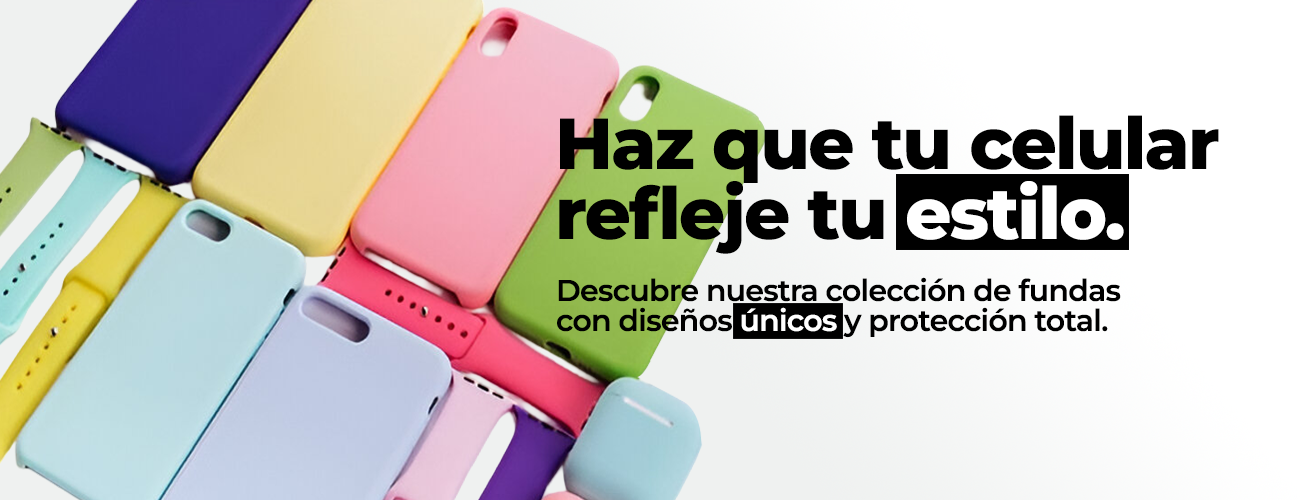
<style>
.page{position:relative;width:1300px;height:500px}
.page>*{position:absolute;margin:0}
.t1{font:72px/70px "Montserrat-ExtraBold";letter-spacing:-0.025em;color:#000000}
.t2{font:72px/70px "Montserrat-ExtraBold";letter-spacing:-0.025em;color:#ffffff}
.t3{font:30px/30px "Montserrat-SemiBold";letter-spacing:-0.025em;color:#000000}
.t4{font:30px/30px "Montserrat-SemiBold";letter-spacing:-0.025em;color:#ffffff}
</style>
<div class="page">
<p class="t1" style="left:559px;top:115px;width:660px;height:139px">Haz que tu celular <br>refleje tu <span class="t2">estilo.</span></p>
<p class="t3" style="left:557px;top:277px;width:564px;height:61px">Descubre nuestra colección de fundas<br>con diseños <span class="t4">únicos</span> y protección total.</p>
</div>
